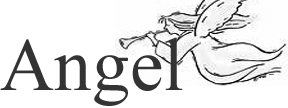
<style>
.page{position:relative;width:288px;height:108px;background:#ffffff}
.page>*{position:absolute;margin:0}
.t1{font:75.3px "TimesNewRomanPSMT";color:#333333}
</style>
<div class="page">
<p class="t1" style="left:0px;top:37px;width:183px;height:69px">Angel</p>
</div>
